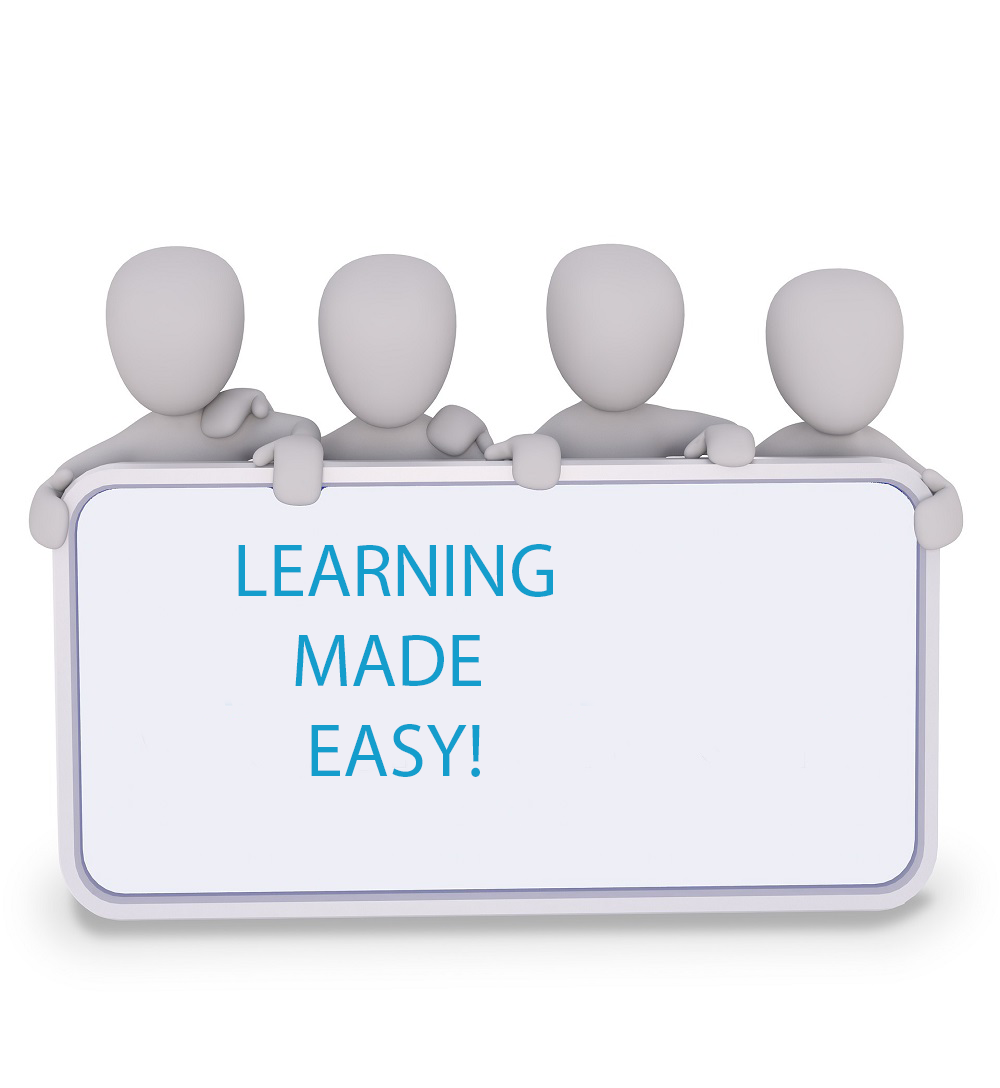
<style>
.page{position:relative;width:1000px;height:1088px;background:#ffffff}
.page>*{position:absolute;margin:0}
.t1{font:75px "MyriadPro-Regular";color:#149dcc}
</style>
<div class="page">
<p class="t1" style="left:238px;top:544px;width:315px;height:233px;text-align:center">LEARNING<br>MADE <br>EASY!</p>
</div>
